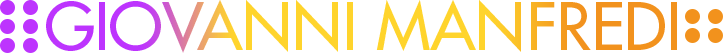
<style>
.page{position:relative;width:723px;height:53px;background:#ffffff}
.page>*{position:absolute;margin:0}
.t1{font:64px "Futura"}
</style>
<div class="page">
<p class="t1" style="left:46px;top:0px;width:631px;height:53px">GIOVANNI MANFREDI</p>
</div>
